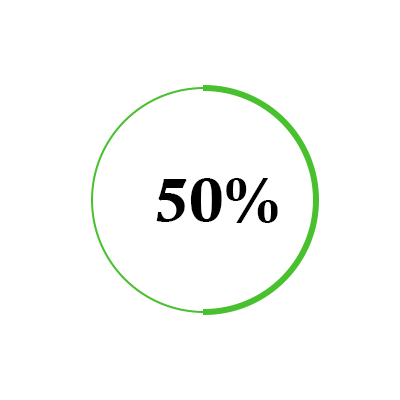
<style>
.page{position:relative;width:400px;height:400px;background:#ffffff}
.page>*{position:absolute;margin:0}
.t1{font:60.9px "CalisMTBol";color:#000000;scale:1.12 1}
</style>
<div class="page">
<p class="t1" style="left:156px;top:178px;width:122px;height:45px">50%</p>
</div>
